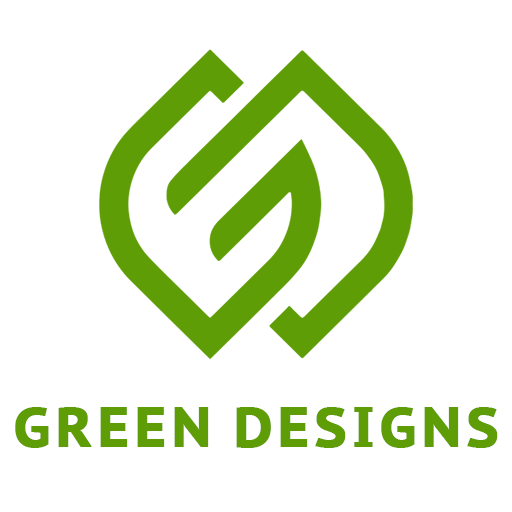
<style>
.page{position:relative;width:512px;height:512px;background:#ffffff}
.page>*{position:absolute;margin:0}
.t1{font:55px "PTSans-CaptionBold";color:#5f9d07;text-transform:uppercase;font-weight:bold}
</style>
<div class="page">
<p class="t1" style="left:15px;top:407px;width:483px;height:41px">Green Designs</p>
</div>
